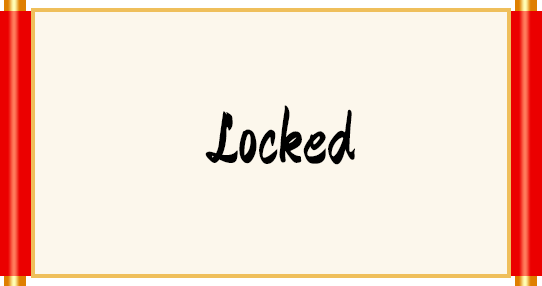
<style>
.page{position:relative;width:542px;height:286px;background:#fcf7ec}
.page>*{position:absolute;margin:0}
.t1{font:72px "ZhiMangXing-Regular";color:#000000}
</style>
<div class="page">
<p class="t1" style="left:205px;top:105px;width:150px;height:60px">Locked</p>
</div>
